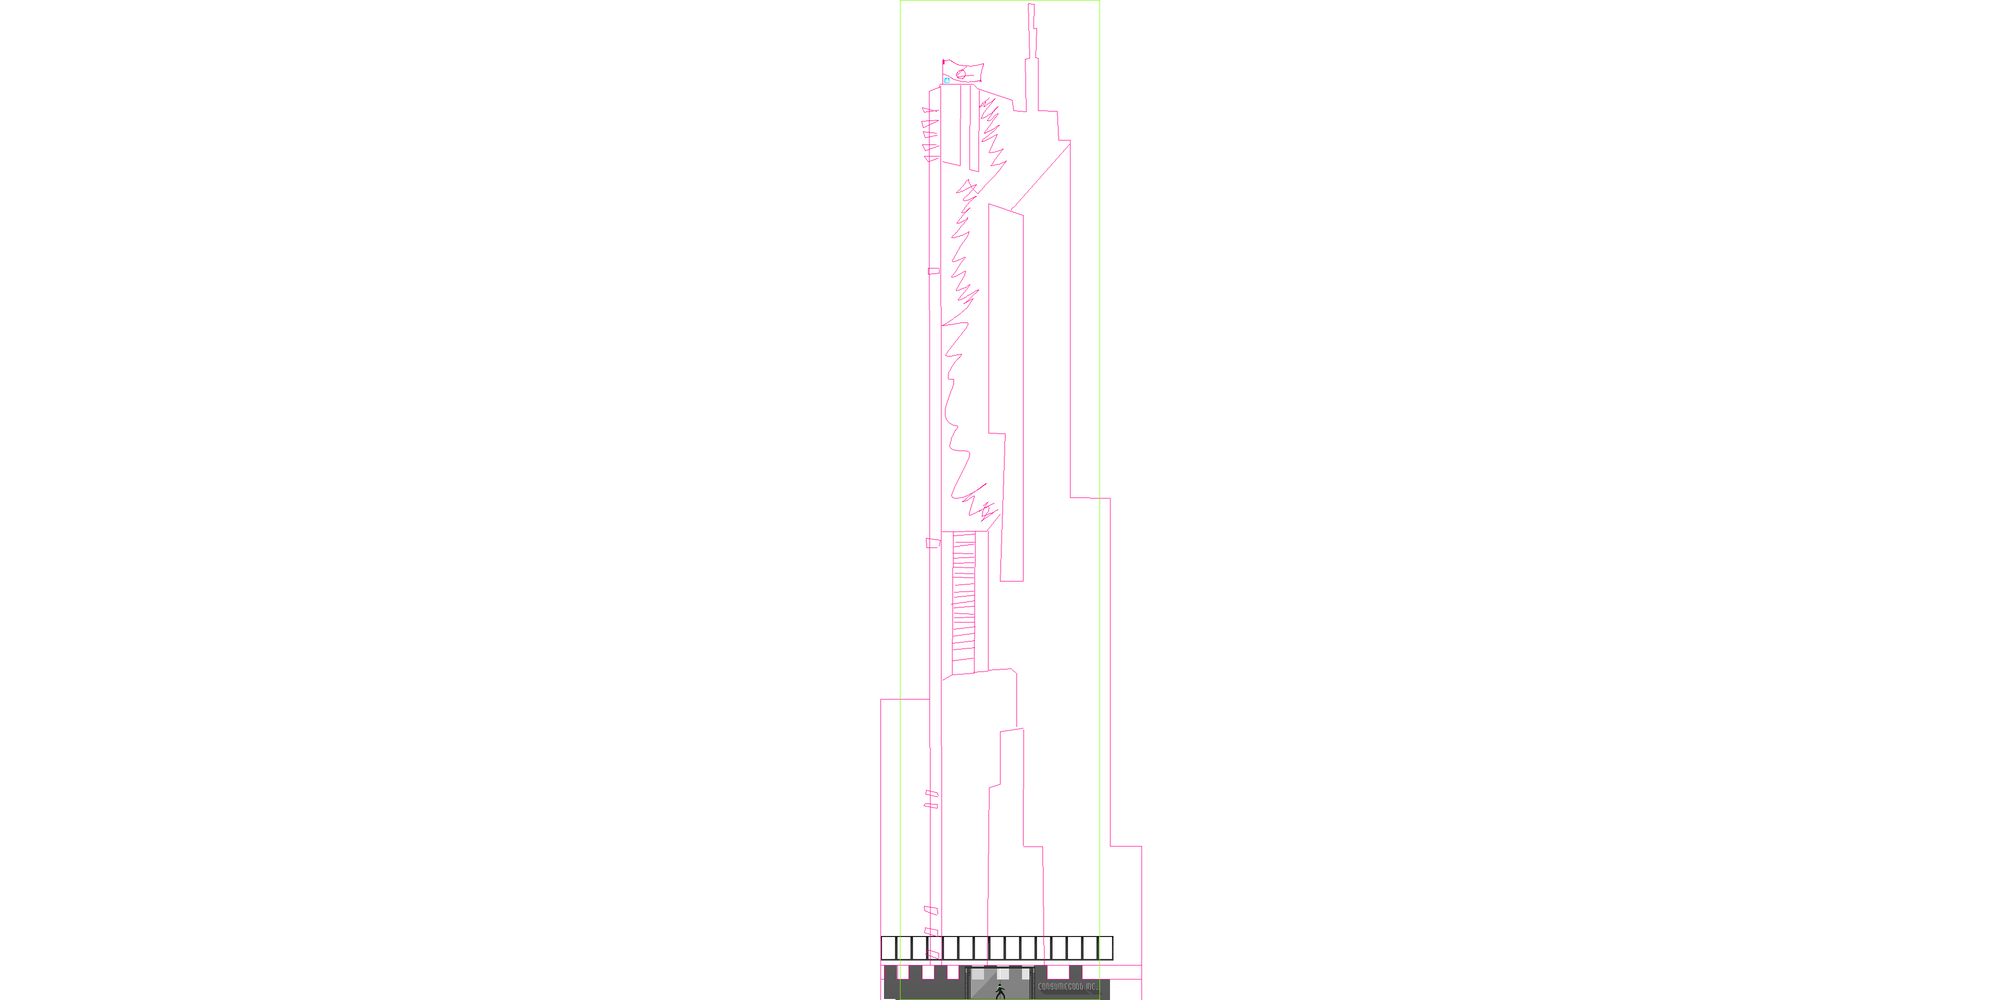
<style>
.page{position:relative;width:2000px;height:1000px;background:#ffffff}
.page>*{position:absolute;margin:0}
.t1{font:9px "Gothular";text-transform:uppercase}
.t2{font:9px "MyriadPro-Regular";text-transform:uppercase}
</style>
<div class="page">
<p class="t1" style="left:1038px;top:983px;width:60px;height:7px">CONSumeGOOD INC<span class="t2">.</span></p>
</div>
